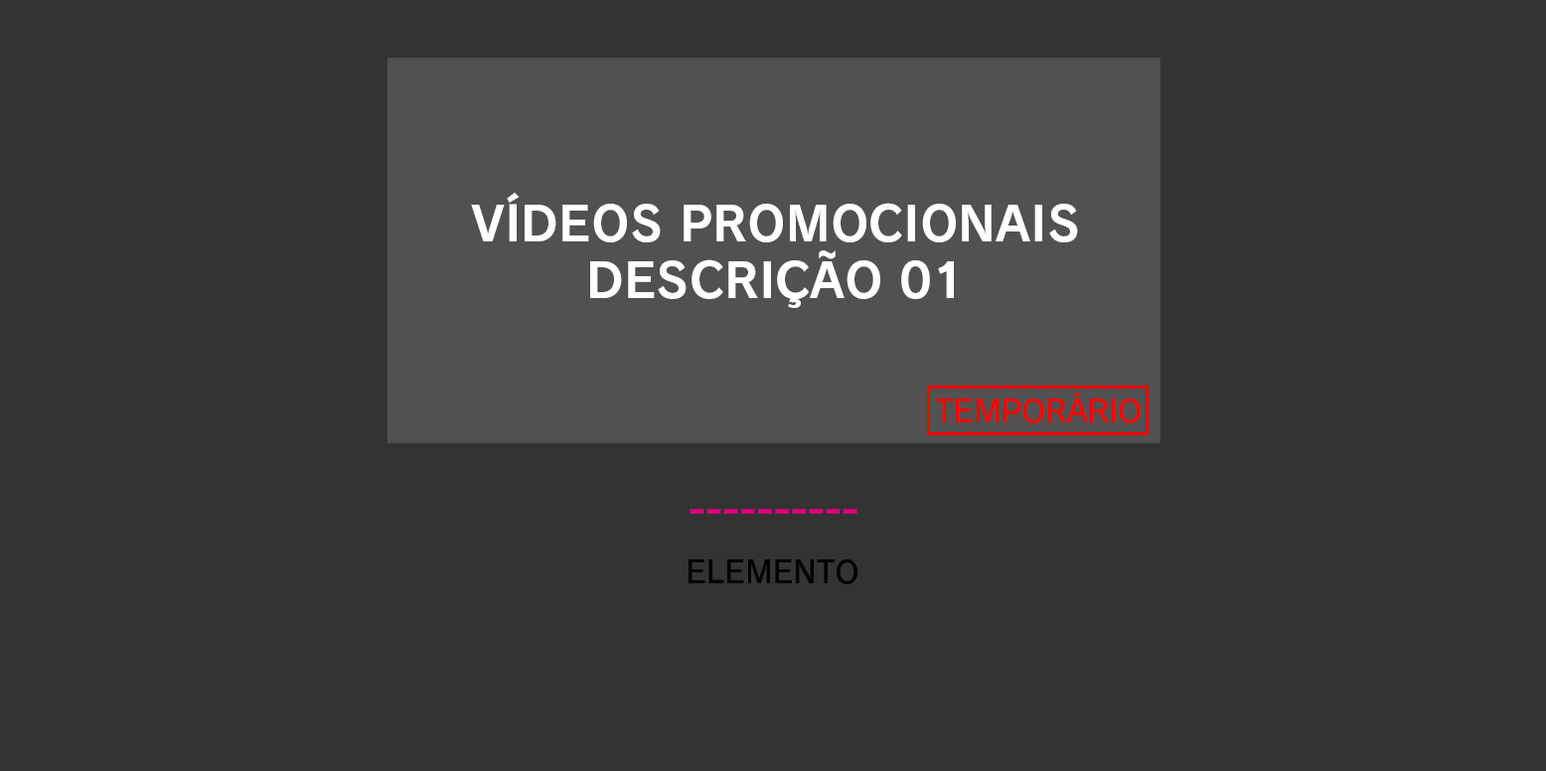
<style>
.page{position:relative;width:1546px;height:771px;background:#333333}
.page>*{position:absolute;margin:0}
.t1{font:47.7px "RodinNTLGPro-B";color:#ffffff}
.t2{font:30.5px "RodinProN-DB";letter-spacing:-0.014em;color:#ff0000}
.t3{font:30.5px "RodinNTLGPro-DB";color:#010101}
</style>
<div class="page">
<p class="t1" style="left:471px;top:192px;width:607px;height:116px;text-align:center">VÍDEOS PROMOCIONAIS<br>DESCRIÇÃO 01</p>
<p class="t2" style="left:935px;top:392px;width:206px;height:31px">TEMPORÁRIO</p>
<p class="t3" style="left:689px;top:559px;width:169px;height:25px">ELEMENTO</p>
</div>
